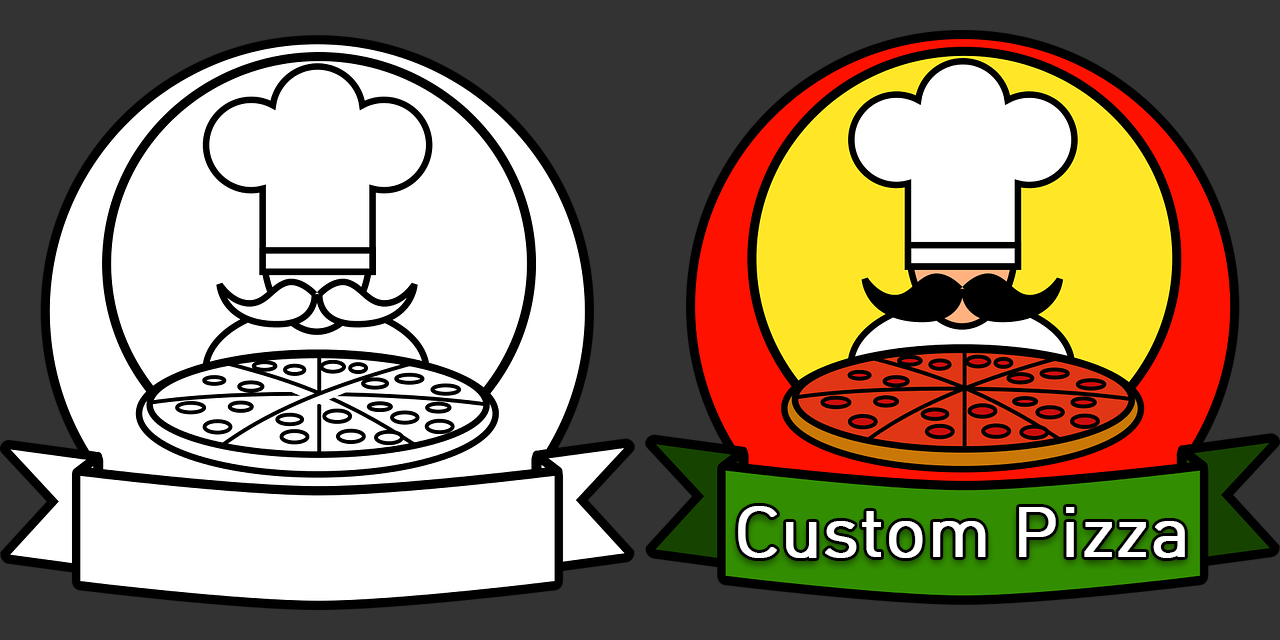
<style>
.page{position:relative;width:1280px;height:640px;background:#333333}
.page>*{position:absolute;margin:0}
.t1{font:67.7px "HCRDotum";color:#ffffff;font-weight:bold}
</style>
<div class="page">
<p class="t1" style="left:738px;top:506px;width:447px;height:52px">Custom Pizza</p>
</div>
